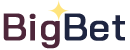
<style>
.page{position:relative;width:130px;height:50px;background:#ffffff}
.page>*{position:absolute;margin:0}
.t1{font:38px "BaiJamjuree-Medium";color:#4e263a;font-weight:bold}
.t2{font:38px "BaiJamjuree-Medium";color:#1e2541;font-weight:bold}
</style>
<div class="page">
<p class="t1" style="left:3px;top:13px;width:122px;height:36px">Big<span class="t2">Bet</span></p>
</div>
